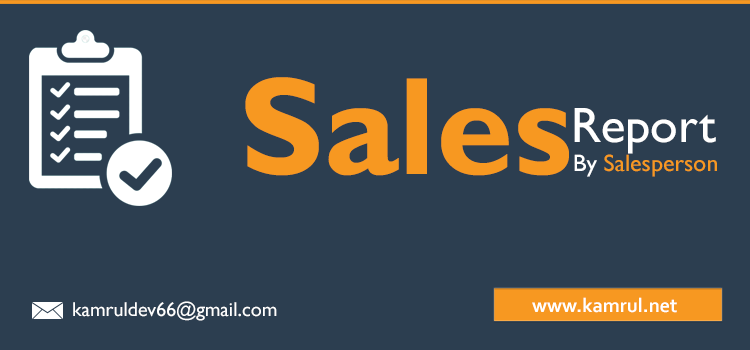
<style>
.page{position:relative;width:750px;height:350px;background:#2c3e50}
.page>*{position:absolute;margin:0}
.t1{font:140px "GillSansMT-Bold";color:#f79821}
.t2{font:50px "GillSansMT";color:#ffffff}
.t3{font:24px "GillSansMT";color:#f79821}
.t4{font:24px "GillSansMT";color:#ffffff}
.t5{font:20px "GillSansMT";color:#ffffff}
.t6{font:20px "Corbel-Bold";color:#ffffff}
</style>
<div class="page">
<p class="t1" style="left:245px;top:77px;width:324px;height:99px">Sales</p>
<p class="t2" style="left:574px;top:108px;width:142px;height:46px">Report</p>
<p class="t3" style="left:574px;top:154px;width:143px;height:23px"><span class="t4">By </span>Salesperson</p>
<p class="t5" style="left:73px;top:301px;width:204px;height:20px">kamruldev66@gmail.com</p>
<p class="t6" style="left:532px;top:297px;width:145px;height:16px">www.kamrul.net</p>
</div>
